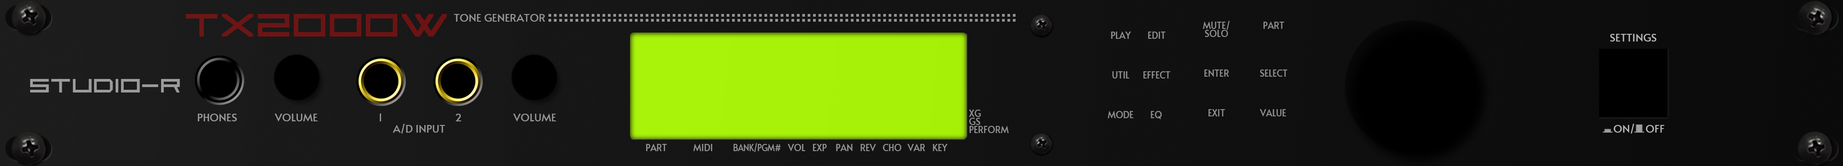
<style>
.page{position:relative;width:1843px;height:166px}
.page>*{position:absolute;margin:0}
.t1{font:45px "SquareSansSerif7";color:#6c1414}
.t2{font:10.8px "Alata-Regular";color:#989898}
.t3{font:9px/8.1px "Alata-Regular";color:#919191}
.t4{font:9px "Alata-Regular";color:#909090}
.t5{font:9px "Alata-Regular";color:#929292}
.t6{font:9px "Alata-Regular";color:#919191}
.t7{font:10.8px "Alata-Regular";color:#b9b9b9}
.t8{font:26.7px "SquareSansSerif7";color:#9c9c9c}
.t9{font:10.8px "Alata-Regular";color:#9b9b9b}
.t10{font:10.8px "Alata-Regular";color:#9a9a9a}
.t11{font:10.8px "Alata-Regular";color:#999999}
.t12{font:10.8px "Alata-Regular";color:#979797}
.t13{font:9px "Alata-Regular";color:#939393}
.t14{font:9px "Alata-Regular";color:#969696}
.t15{font:9px "Alata-Regular";color:#959595;scale:0.88 1}
.t16{font:9px "Alata-Regular";color:#959595}
.t17{font:9px "Alata-Regular";color:#949494}
</style>
<div class="page">
<p class="t1" style="left:186px;top:14px;width:261px;height:22px">TX2000W</p>
<p class="t2" style="left:454px;top:14px;width:91px;height:8px">TONE GENERATOR</p>
<p class="t3" style="left:1203px;top:21px;width:27px;height:16px;text-align:center">MUTE/<br>SOLO</p>
<p class="t4" style="left:1264px;top:22px;width:20px;height:7px">PART</p>
<p class="t5" style="left:1111px;top:32px;width:20px;height:7px">PLAY</p>
<p class="t6" style="left:1148px;top:32px;width:18px;height:7px">EDIT</p>
<p class="t7" style="left:1610px;top:34px;width:47px;height:7px">SETTINGS</p>
<p class="t5" style="left:1112px;top:71px;width:18px;height:7px">UTIL</p>
<p class="t6" style="left:1143px;top:71px;width:27px;height:7px">EFFECT</p>
<p class="t6" style="left:1204px;top:69px;width:25px;height:8px">ENTER</p>
<p class="t4" style="left:1260px;top:69px;width:27px;height:8px">SELECT</p>
<p class="t8" style="left:30px;top:79px;width:150px;height:13px">STUDIO-R</p>
<p class="t9" style="left:198px;top:113px;width:39px;height:8px">PHONES</p>
<p class="t10" style="left:275px;top:113px;width:43px;height:8px">VOLUME</p>
<p class="t11" style="left:380px;top:113px;width:1px;height:8px">1</p>
<p class="t2" style="left:455px;top:113px;width:6px;height:8px">2</p>
<p class="t12" style="left:513px;top:113px;width:43px;height:8px">VOLUME</p>
<p class="t13" style="left:969px;top:109px;width:12px;height:8px">XG</p>
<p class="t6" style="left:1108px;top:111px;width:26px;height:7px">MODE</p>
<p class="t6" style="left:1151px;top:111px;width:11px;height:8px">EQ</p>
<p class="t6" style="left:1208px;top:109px;width:17px;height:7px">EXIT</p>
<p class="t4" style="left:1260px;top:109px;width:26px;height:7px">VALUE</p>
<p class="t11" style="left:393px;top:123px;width:52px;height:10px">A/D INPUT</p>
<p class="t13" style="left:969px;top:126px;width:40px;height:7px">PERFORM</p>
<p class="t13" style="left:969px;top:117px;width:12px;height:8px">GS</p>
<p class="t7" style="left:1614px;top:123px;width:51px;height:10px">ON/    OFF</p>
<p class="t14" style="left:646px;top:144px;width:21px;height:7px">PART</p>
<p class="t14" style="left:693px;top:144px;width:19px;height:7px">MIDI</p>
<p class="t15" style="left:734px;top:143px;width:47px;height:9px">BANK/PGM#</p>
<p class="t16" style="left:788px;top:144px;width:18px;height:7px">VOL</p>
<p class="t17" style="left:813px;top:144px;width:14px;height:7px">EXP</p>
<p class="t17" style="left:836px;top:144px;width:17px;height:7px">PAN</p>
<p class="t17" style="left:860px;top:144px;width:16px;height:7px">REV</p>
<p class="t17" style="left:883px;top:144px;width:18px;height:7px">CHO</p>
<p class="t13" style="left:907px;top:144px;width:18px;height:7px">VAR</p>
<p class="t13" style="left:933px;top:144px;width:15px;height:7px">KEY</p>
</div>
